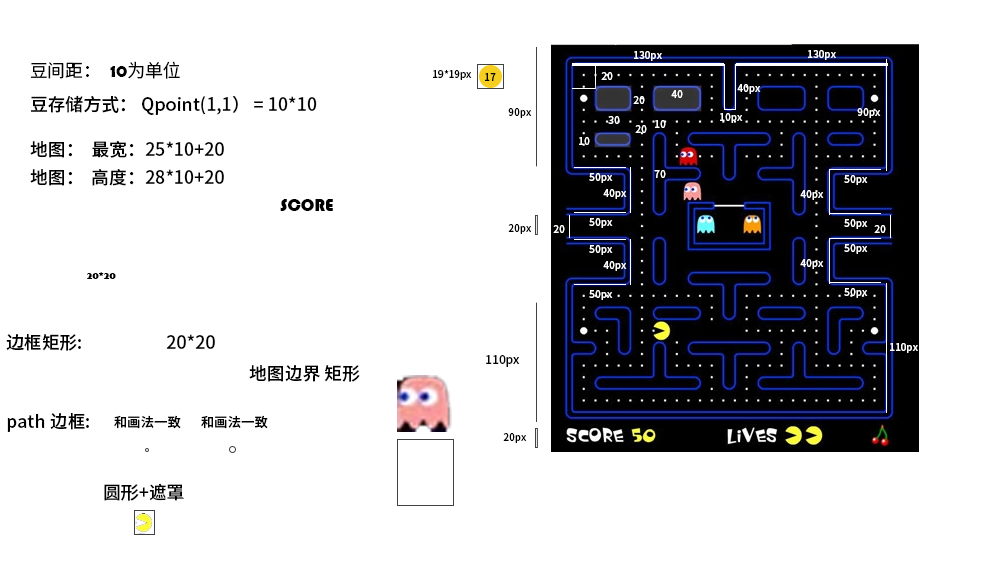
<style>
.page{position:relative;width:997px;height:584px;background:#ffffff}
.page>*{position:absolute;margin:0}
.t1{font:10px "SourceHanSansCN-Medium";color:#fefefe}
.t2{font:17.8px "SourceHanSansCN-Normal";color:#000000}
.t3{font:17.8px "BerlinSansFBDemi-Bold";color:#000000}
.t4{font:10px "SourceHanSansCN-Medium";color:#000000}
.t5{font:17.8px "SourceHanSansCN-Medium";color:#000000}
.t6{font:10px "SourceHanSansCN-Medium";color:#ffffff}
.t7{font:17.8px "Bauhaus93";color:#000000}
.t8{font:10px "BerlinSansFB-Bold";color:#000000}
.t9{font:12px "SourceHanSansCN-Medium";color:#000000}
.t10{font:13.4px "SourceHanSansCN-Medium";color:#000000}
</style>
<div class="page">
<p class="t1" style="left:634px;top:51px;width:28px;height:10px">130px</p>
<p class="t1" style="left:808px;top:50px;width:28px;height:10px">130px</p>
<p class="t2" style="left:31px;top:61px;width:149px;height:18px">豆间距：<span class="t3">  10</span>为单位</p>
<p class="t4" style="left:433px;top:70px;width:39px;height:10px">19*19px</p>
<p class="t4" style="left:485px;top:73px;width:11px;height:8px">17</p>
<p class="t1" style="left:601px;top:72px;width:12px;height:8px">20</p>
<p class="t1" style="left:737px;top:84px;width:24px;height:10px">40px</p>
<p class="t5" style="left:31px;top:95px;width:286px;height:20px">豆存储方式： Qpoint(1,1） = 10*10</p>
<p class="t1" style="left:633px;top:96px;width:12px;height:8px">20</p>
<p class="t1" style="left:671px;top:90px;width:12px;height:8px">40</p>
<p class="t4" style="left:508px;top:108px;width:24px;height:10px">90px</p>
<p class="t1" style="left:720px;top:113px;width:23px;height:10px">10px</p>
<p class="t6" style="left:857px;top:108px;width:24px;height:10px">90px</p>
<p class="t1" style="left:608px;top:116px;width:12px;height:8px">30</p>
<p class="t1" style="left:635px;top:125px;width:12px;height:8px">20</p>
<p class="t1" style="left:655px;top:120px;width:11px;height:8px">10</p>
<p class="t1" style="left:579px;top:137px;width:11px;height:8px">10</p>
<p class="t5" style="left:30px;top:140px;width:194px;height:18px">地图：  最宽：25*10+20</p>
<p class="t5" style="left:30px;top:169px;width:194px;height:17px">地图：  高度：28*10+20</p>
<p class="t1" style="left:589px;top:173px;width:24px;height:10px">50px</p>
<p class="t1" style="left:654px;top:170px;width:12px;height:8px">70</p>
<p class="t1" style="left:844px;top:175px;width:24px;height:10px">50px</p>
<p class="t1" style="left:603px;top:189px;width:24px;height:10px">40px</p>
<p class="t1" style="left:800px;top:190px;width:24px;height:10px">40px</p>
<p class="t7" style="left:280px;top:199px;width:53px;height:12px">SCORE</p>
<p class="t1" style="left:589px;top:218px;width:24px;height:10px">50px</p>
<p class="t1" style="left:844px;top:219px;width:24px;height:10px">50px</p>
<p class="t4" style="left:508px;top:224px;width:24px;height:10px">20px</p>
<p class="t1" style="left:553px;top:225px;width:12px;height:8px">20</p>
<p class="t1" style="left:874px;top:225px;width:12px;height:8px">20</p>
<p class="t1" style="left:589px;top:245px;width:24px;height:10px">50px</p>
<p class="t1" style="left:844px;top:244px;width:24px;height:10px">50px</p>
<p class="t1" style="left:603px;top:261px;width:24px;height:10px">40px</p>
<p class="t1" style="left:800px;top:259px;width:24px;height:10px">40px</p>
<p class="t8" style="left:87px;top:272px;width:29px;height:7px">20*20</p>
<p class="t1" style="left:589px;top:290px;width:24px;height:10px">50px</p>
<p class="t1" style="left:844px;top:288px;width:24px;height:10px">50px</p>
<p class="t5" style="left:6px;top:334px;width:75px;height:17px">边框矩形:</p>
<p class="t5" style="left:166px;top:334px;width:49px;height:15px">20*20</p>
<p class="t6" style="left:890px;top:343px;width:28px;height:10px">110px</p>
<p class="t5" style="left:249px;top:365px;width:111px;height:17px">地图边界 矩形</p>
<p class="t9" style="left:486px;top:355px;width:34px;height:12px">110px</p>
<p class="t5" style="left:7px;top:413px;width:82px;height:19px">path 边框:</p>
<p class="t10" style="left:114px;top:415px;width:67px;height:14px">和画法一致</p>
<p class="t10" style="left:201px;top:415px;width:67px;height:14px">和画法一致</p>
<p class="t4" style="left:503px;top:433px;width:24px;height:10px">20px</p>
<p class="t5" style="left:104px;top:483px;width:80px;height:18px">圆形+遮罩</p>
</div>
